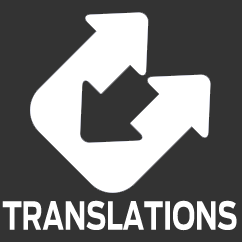
<style>
.page{position:relative;width:242px;height:242px;background:#333333}
.page>*{position:absolute;margin:0}
.t1{font:38px "Antenna-Bold";color:#ffffff;scale:0.71 1}
</style>
<div class="page">
<p class="t1" style="left:2px;top:200px;width:235px;height:31px">TRANSLATIONS</p>
</div>
